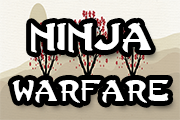
<style>
.page{position:relative;width:180px;height:120px;background:#000000}
.page>*{position:absolute;margin:0}
.t1{font:29.8px "LastNinja";color:#ffffff}
.t2{font:23.1px "LastNinja";color:#ffffff}
</style>
<div class="page">
<p class="t1" style="left:31px;top:22px;width:120px;height:31px">Ninja</p>
<p class="t2" style="left:12px;top:80px;width:157px;height:23px">Warfare</p>
</div>
